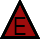
<style>
.page{position:relative;width:40px;height:40px;background:#ffffff}
.page>*{position:absolute;margin:0}
.t1{font:25px "ArialNarrow";color:#000000}
</style>
<div class="page">
<p class="t1" style="left:14px;top:17px;width:12px;height:18px">E</p>
</div>
